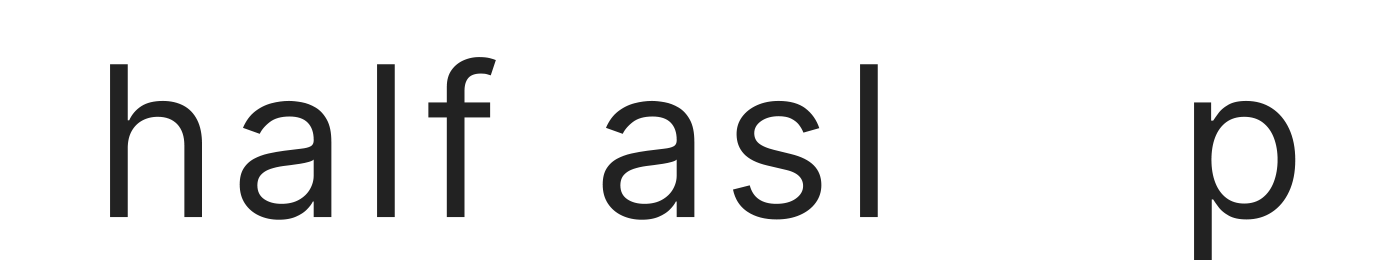
<style>
.page{position:relative;width:1400px;height:280px;background:#ffffff}
.page>*{position:absolute;margin:0}
.t1{font:210px "Inter-Regular";letter-spacing:0.081em;color:#222222}
</style>
<div class="page">
<p class="t1" style="left:110px;top:57px;width:1186px;height:203px">half asleep</p>
</div>
